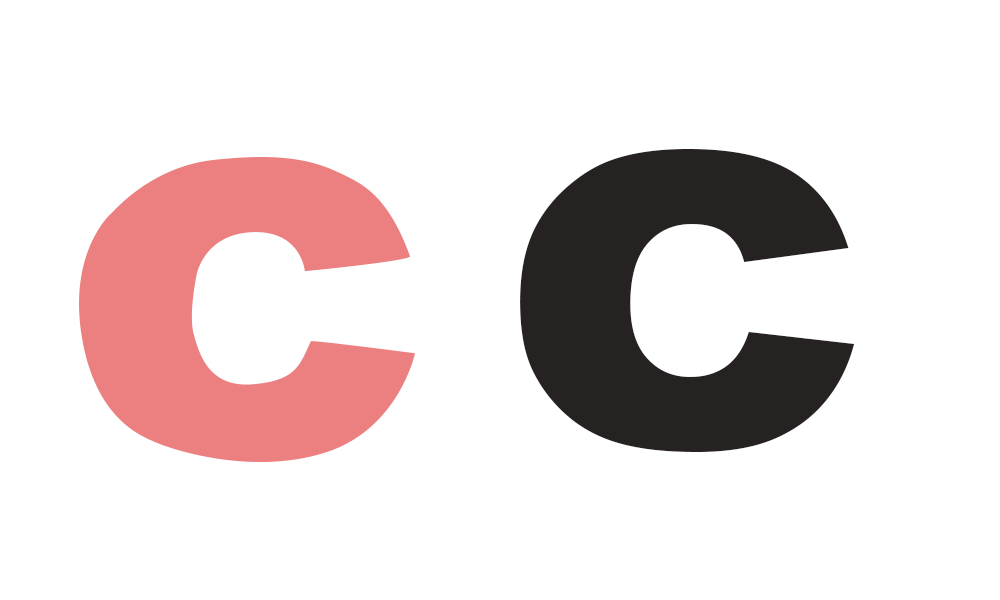
<style>
.page{position:relative;width:1000px;height:600px;background:#ffffff}
.page>*{position:absolute;margin:0}
.t1{font:557.2px "Arial-Black";color:#262222}
</style>
<div class="page">
<p class="t1" style="left:520px;top:149px;width:335px;height:303px">c</p>
</div>
